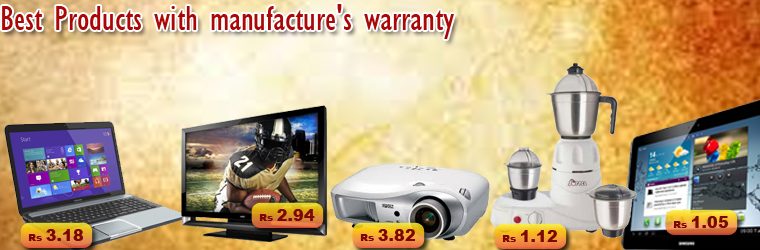
<style>
.page{position:relative;width:760px;height:250px}
.page>*{position:absolute;margin:0}
.t1{font:36px "GillSansMT-Condensed";color:#ab0707}
.t2{font:16.4px "Arial-Black";color:#7d0606}
.t3{font:10.2px "Arial-Black";color:#7d0606}
</style>
<div class="page">
<p class="t1" style="left:2px;top:4px;width:452px;height:35px">Best Products with manufacture's warranty</p>
<p class="t2" style="left:259px;top:209px;width:56px;height:12px"><span class="t3">Rs </span>2.94</p>
<p class="t2" style="left:673px;top:216px;width:55px;height:12px"><span class="t3">Rs </span>1.05</p>
<p class="t2" style="left:28px;top:229px;width:55px;height:12px"><span class="t3">Rs </span>3.18</p>
<p class="t2" style="left:360px;top:229px;width:55px;height:12px"><span class="t3">Rs </span>3.82</p>
<p class="t2" style="left:502px;top:230px;width:55px;height:12px"><span class="t3">Rs </span>1.12</p>
</div>
